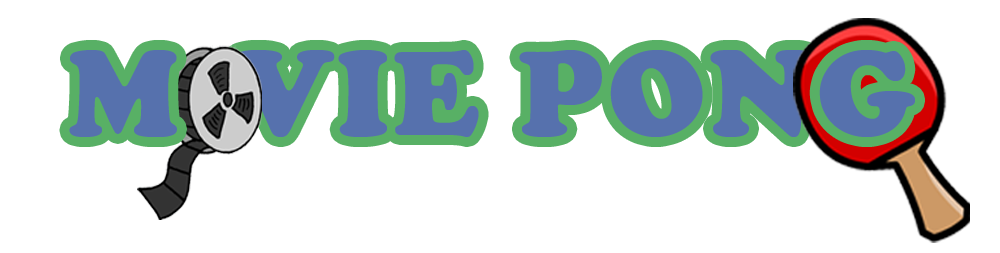
<style>
.page{position:relative;width:1000px;height:253px;background:#ffffff}
.page>*{position:absolute;margin:0}
.t1{font:125.4px "CooperBlack";letter-spacing:0.03em;color:#5671ad}
</style>
<div class="page">
<p class="t1" style="left:69px;top:50px;width:108px;height:87px">M</p>
<p class="t1" style="left:233px;top:50px;width:579px;height:87px">VIE PON</p>
<p class="t1" style="left:819px;top:50px;width:96px;height:87px">G</p>
</div>
